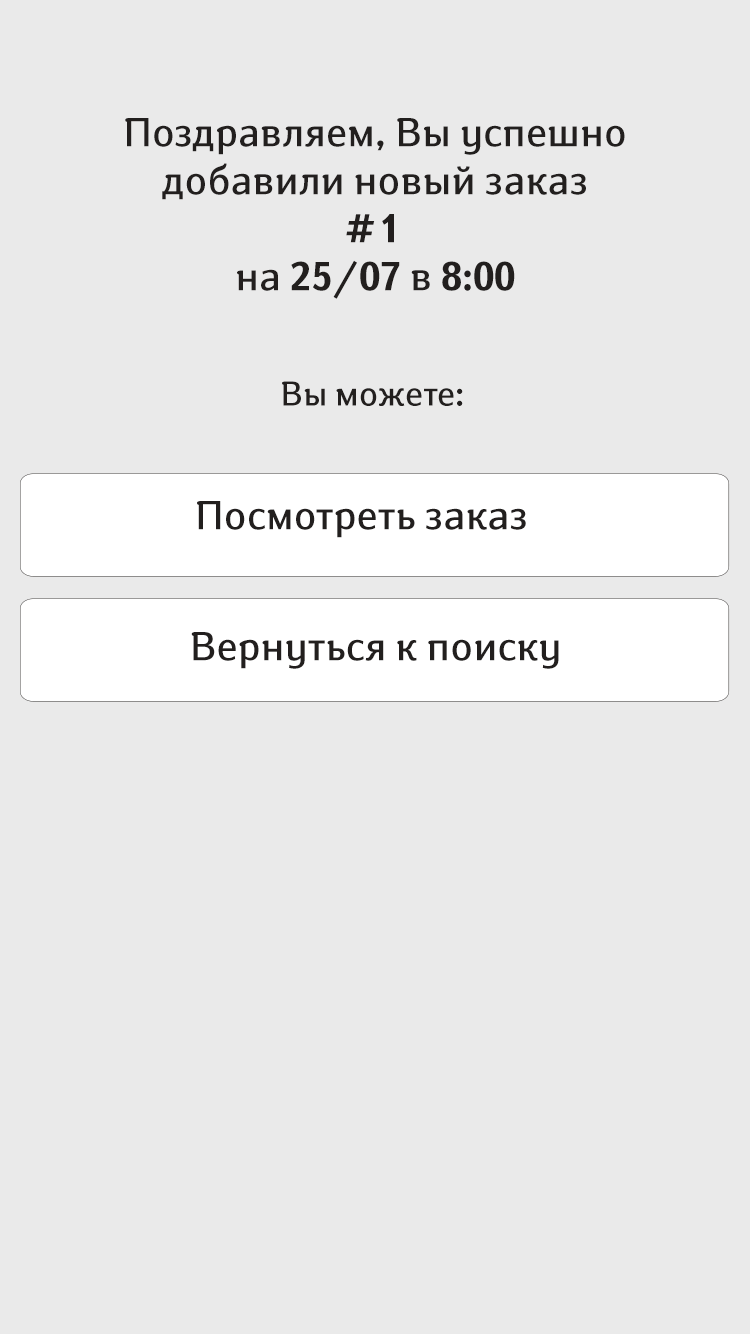
<style>
.page{position:relative;width:750px;height:1335px;background:#eaeaea}
.page>*{position:absolute;margin:0}
.t1{font:40px/48px "SusanBook-Regular";color:#221f1e}
.t2{font:40px/48px "SusanBold-Regular";color:#221f1e}
.t3{font:34px "SusanBook-Regular";color:#221f1e}
.t4{font:40px "SusanBook-Regular";color:#221f1e}
</style>
<div class="page">
<p class="t1" style="left:125px;top:118px;width:500px;height:181px;text-align:center">Поздравляем, Вы успешно добавили новый заказ<br><span class="t2"># 1<br></span>на <span class="t2">25/07</span> в <span class="t2">8:00</span></p>
<p class="t3" style="left:282px;top:381px;width:181px;height:25px">Вы можете:</p>
<p class="t4" style="left:197px;top:501px;width:329px;height:37px">Посмотреть заказ</p>
<p class="t4" style="left:191px;top:632px;width:368px;height:37px">Вернуться к поиску</p>
</div>
